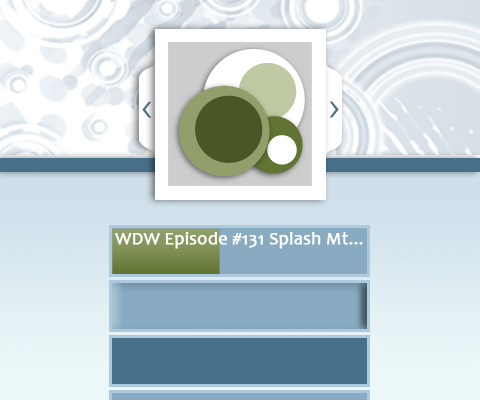
<style>
.page{position:relative;width:480px;height:400px}
.page>*{position:absolute;margin:0}
.t1{font:18px "Candara";color:#ffffff;font-weight:bold}
</style>
<div class="page">
<p class="t1" style="left:115px;top:232px;width:248px;height:17px">WDW Episode #131 Splash Mt...</p>
</div>
